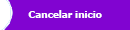
<style>
.page{position:relative;width:130px;height:30px;background:#8104d1}
.page>*{position:absolute;margin:0}
.t1{font:10px "Tahoma-Bold";color:#ffffff}
</style>
<div class="page">
<p class="t1" style="left:28px;top:10px;width:74px;height:8px">Cancelar inicio</p>
</div>
